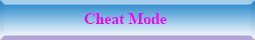
<style>
.page{position:relative;width:255px;height:40px}
.page>*{position:absolute;margin:0}
.t1{font:15.8px "TimesNewRomanPS-BoldMT";color:#d815ed}
</style>
<div class="page">
<p class="t1" style="left:84px;top:13px;width:83px;height:11px">Cheat Mode</p>
</div>
